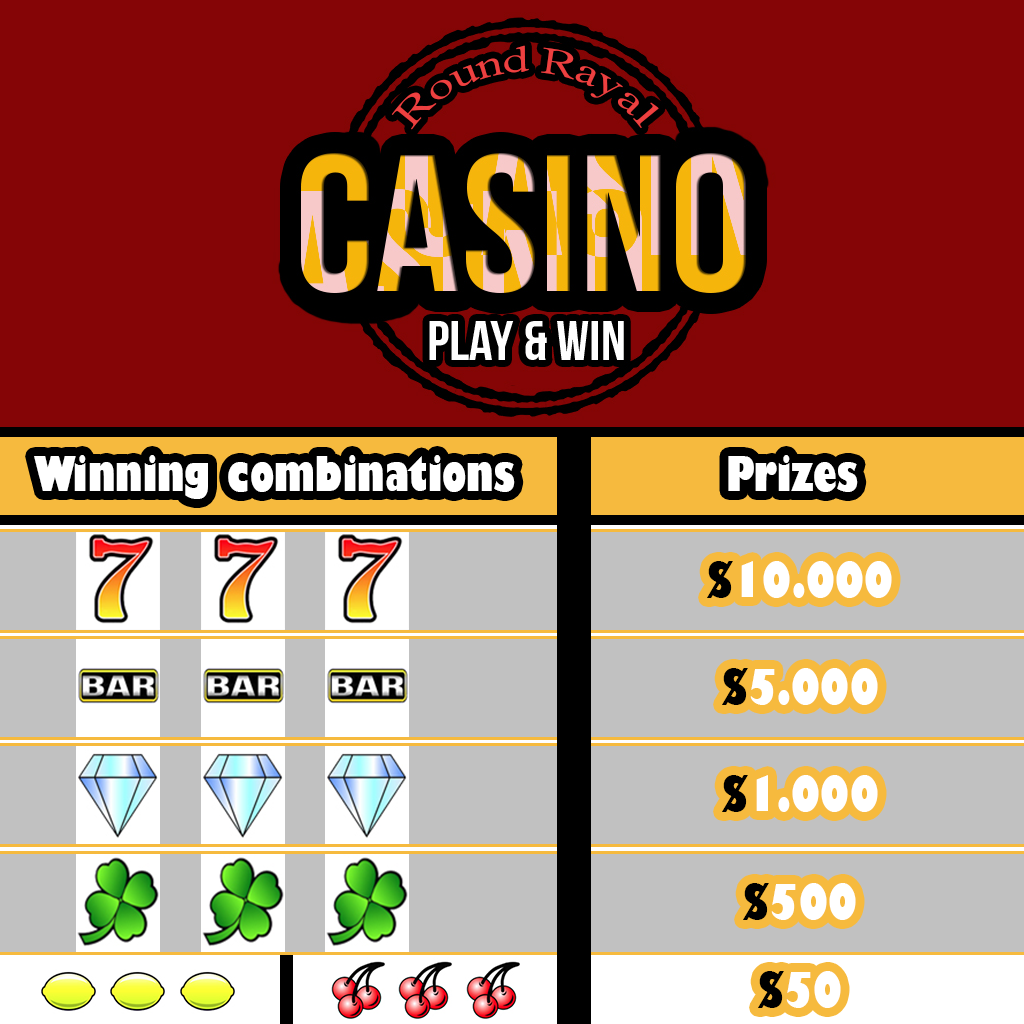
<style>
.page{position:relative;width:1024px;height:1024px;background:#850506}
.page>*{position:absolute;margin:0}
.t1{font:46.8px "GillSans-UltraBoldCondensed";color:#ffffff;scale:1.08 1}
.t2{font:46.8px "GillSans-UltraBoldCondensed";color:#000000;scale:1.08 1}
</style>
<div class="page">
<p class="t1" style="left:34px;top:455px;width:481px;height:44px">Winning combinations</p>
<p class="t1" style="left:728px;top:455px;width:130px;height:37px">Prizes</p>
<p class="t1" style="left:707px;top:561px;width:185px;height:37px"><span class="t2">$</span>10.000</p>
<p class="t1" style="left:722px;top:668px;width:156px;height:37px"><span class="t2">$</span>5.000</p>
<p class="t1" style="left:722px;top:775px;width:156px;height:37px"><span class="t2">$</span>1.000</p>
<p class="t1" style="left:743px;top:883px;width:113px;height:37px"><span class="t2">$</span>500</p>
<p class="t1" style="left:758px;top:971px;width:83px;height:37px"><span class="t2">$</span>50</p>
</div>
